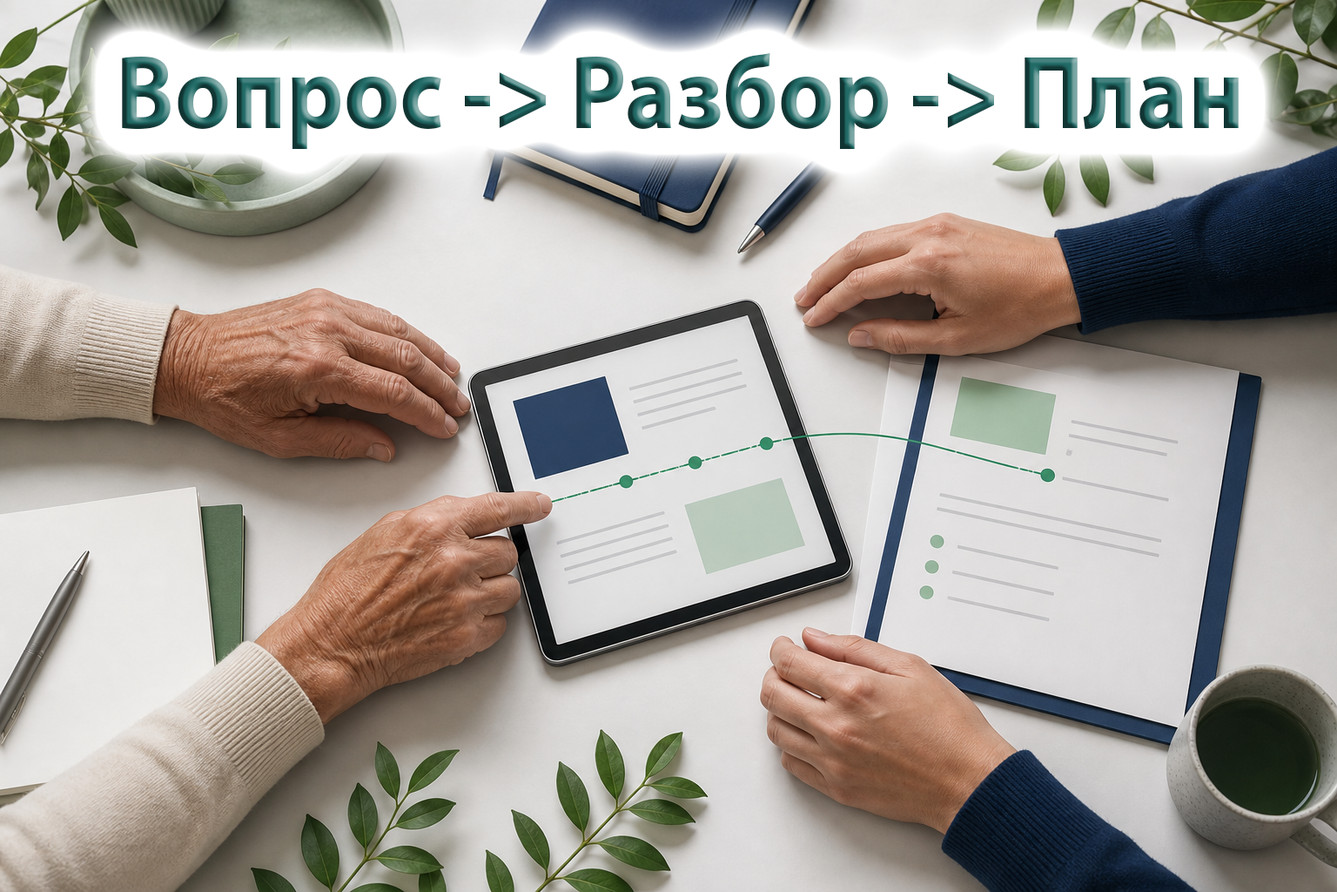
<style>
.page{position:relative;width:1337px;height:892px}
.page>*{position:absolute;margin:0}
.t1{font:104.5px "MyriadPro-Bold";scale:0.92 1}
</style>
<div class="page">
<p class="t1" style="left:122px;top:53px;width:1117px;height:96px">Вопрос -&gt; Разбор -&gt; План</p>
</div>
